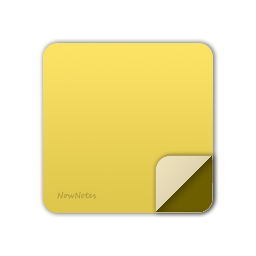
<style>
.page{position:relative;width:256px;height:256px;background:#ffffff}
.page>*{position:absolute;margin:0}
.t1{font:7.8px "SegoeScript";color:#b5a13b}
</style>
<div class="page">
<p class="t1" style="left:57px;top:191px;width:39px;height:8px">NowNotes</p>
</div>
